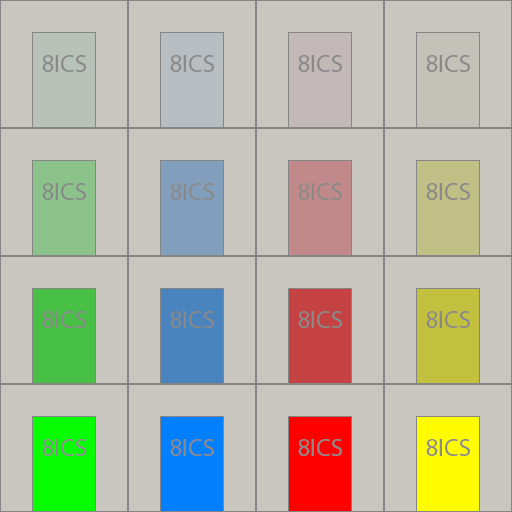
<style>
.page{position:relative;width:512px;height:512px;background:#c8c6bf}
.page>*{position:absolute;margin:0}
.t1{font:25px "MyriadPro-Regular";color:#898989}
</style>
<div class="page">
<p class="t1" style="left:42px;top:55px;width:44px;height:17px">8ICS</p>
<p class="t1" style="left:170px;top:55px;width:44px;height:17px">8ICS</p>
<p class="t1" style="left:298px;top:55px;width:44px;height:17px">8ICS</p>
<p class="t1" style="left:426px;top:55px;width:44px;height:17px">8ICS</p>
<p class="t1" style="left:42px;top:183px;width:44px;height:17px">8ICS</p>
<p class="t1" style="left:170px;top:183px;width:44px;height:17px">8ICS</p>
<p class="t1" style="left:298px;top:183px;width:44px;height:17px">8ICS</p>
<p class="t1" style="left:426px;top:183px;width:44px;height:17px">8ICS</p>
<p class="t1" style="left:42px;top:311px;width:44px;height:17px">8ICS</p>
<p class="t1" style="left:170px;top:311px;width:44px;height:17px">8ICS</p>
<p class="t1" style="left:298px;top:311px;width:44px;height:17px">8ICS</p>
<p class="t1" style="left:426px;top:311px;width:44px;height:17px">8ICS</p>
<p class="t1" style="left:42px;top:439px;width:44px;height:17px">8ICS</p>
<p class="t1" style="left:170px;top:439px;width:44px;height:17px">8ICS</p>
<p class="t1" style="left:298px;top:439px;width:44px;height:17px">8ICS</p>
<p class="t1" style="left:426px;top:439px;width:44px;height:17px">8ICS</p>
</div>
